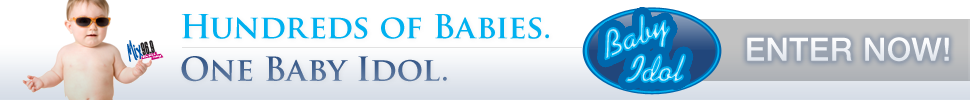
<style>
.page{position:relative;width:970px;height:100px;background:#ffffff}
.page>*{position:absolute;margin:0}
.t1{font:32.3px/42.6px "TrajanPro-Bold";color:#00b1f0}
.t2{font:32.3px/42.6px "TrajanPro-Bold";color:#21467b}
.t3{font:37.3px "KaufmannStd-Bold"}
.t4{font:32.3px "HelveticaNeueLTStd-Md";letter-spacing:0.025em;color:#ffffff}
</style>
<div class="page">
<p class="t1" style="left:181px;top:14px;width:368px;height:68px">Hundreds of Babies.<span class="t2"><br>One Baby Idol.</span></p>
<p class="t3" style="left:605px;top:15px;width:65px;height:45px;rotate:-22deg">Baby</p>
<p class="t4" style="left:747px;top:37px;width:202px;height:25px">ENTER NOW!</p>
<p class="t3" style="left:626px;top:54px;width:59px;height:28px">Idol</p>
</div>
